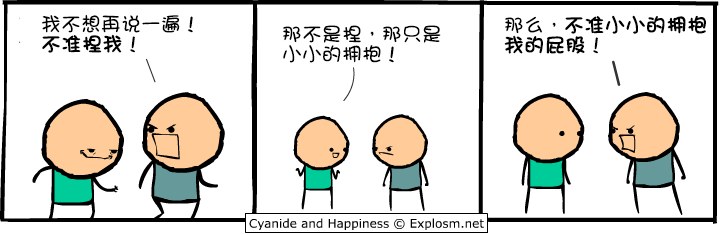
<style>
.page{position:relative;width:720px;height:235px;background:#ffffff}
.page>*{position:absolute;margin:0}
.t1{font:20px/20px "DFGirl";color:#000000}
.t2{font:20px/20px "DFGirl";color:#000000;font-weight:bold}
</style>
<div class="page">
<p class="t1" style="left:41px;top:14px;width:152px;height:39px">我不想再说一遍！<br><span class="t2">不准捏我</span>！</p>
<p class="t2" style="left:504px;top:15px;width:202px;height:39px"><span class="t1">那么，</span>不准小小的拥抱<br>我的屁股<span class="t1">！</span></p>
<p class="t1" style="left:283px;top:25px;width:158px;height:38px">那不是捏，那只是<br>小小的拥抱！</p>
</div>
